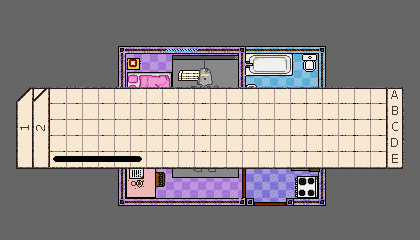
<style>
.page{position:relative;width:420px;height:240px;background:#666666}
.page>*{position:absolute;margin:0}
.t1{font:12px "Tahoma";color:#3a3935}
.t2{font:11.7px "Tahoma";color:#3a3935}
</style>
<div class="page">
<p class="t1" style="left:391px;top:90px;width:7px;height:9px">A</p>
<p class="t1" style="left:392px;top:106px;width:6px;height:9px">B</p>
<p class="t2" style="left:20px;top:125px;width:9px;height:5px;rotate:-90deg">1</p>
<p class="t2" style="left:36px;top:125px;width:9px;height:6px;rotate:-90deg">2</p>
<p class="t1" style="left:392px;top:122px;width:6px;height:9px">C</p>
<p class="t1" style="left:391px;top:138px;width:7px;height:9px">D</p>
<p class="t1" style="left:392px;top:154px;width:6px;height:9px">E</p>
</div>
